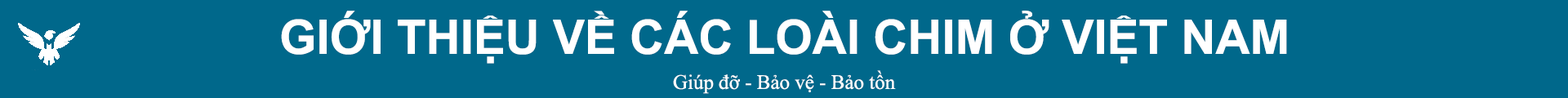
<style>
.page{position:relative;width:1568px;height:98px;background:#00688b}
.page>*{position:absolute;margin:0}
.t1{font:47.6px "Arial-BoldMT";color:#ffffff}
.t2{font:20.4px "TimesNewRomanPSMT";color:#ffffff}
</style>
<div class="page">
<p class="t1" style="left:281px;top:11px;width:1006px;height:53px">GIỚI THIỆU VỀ CÁC LOÀI CHIM Ở VIỆT NAM</p>
<p class="t2" style="left:673px;top:70px;width:223px;height:24px">Giúp đỡ - Bảo vệ - Bảo tồn</p>
</div>
